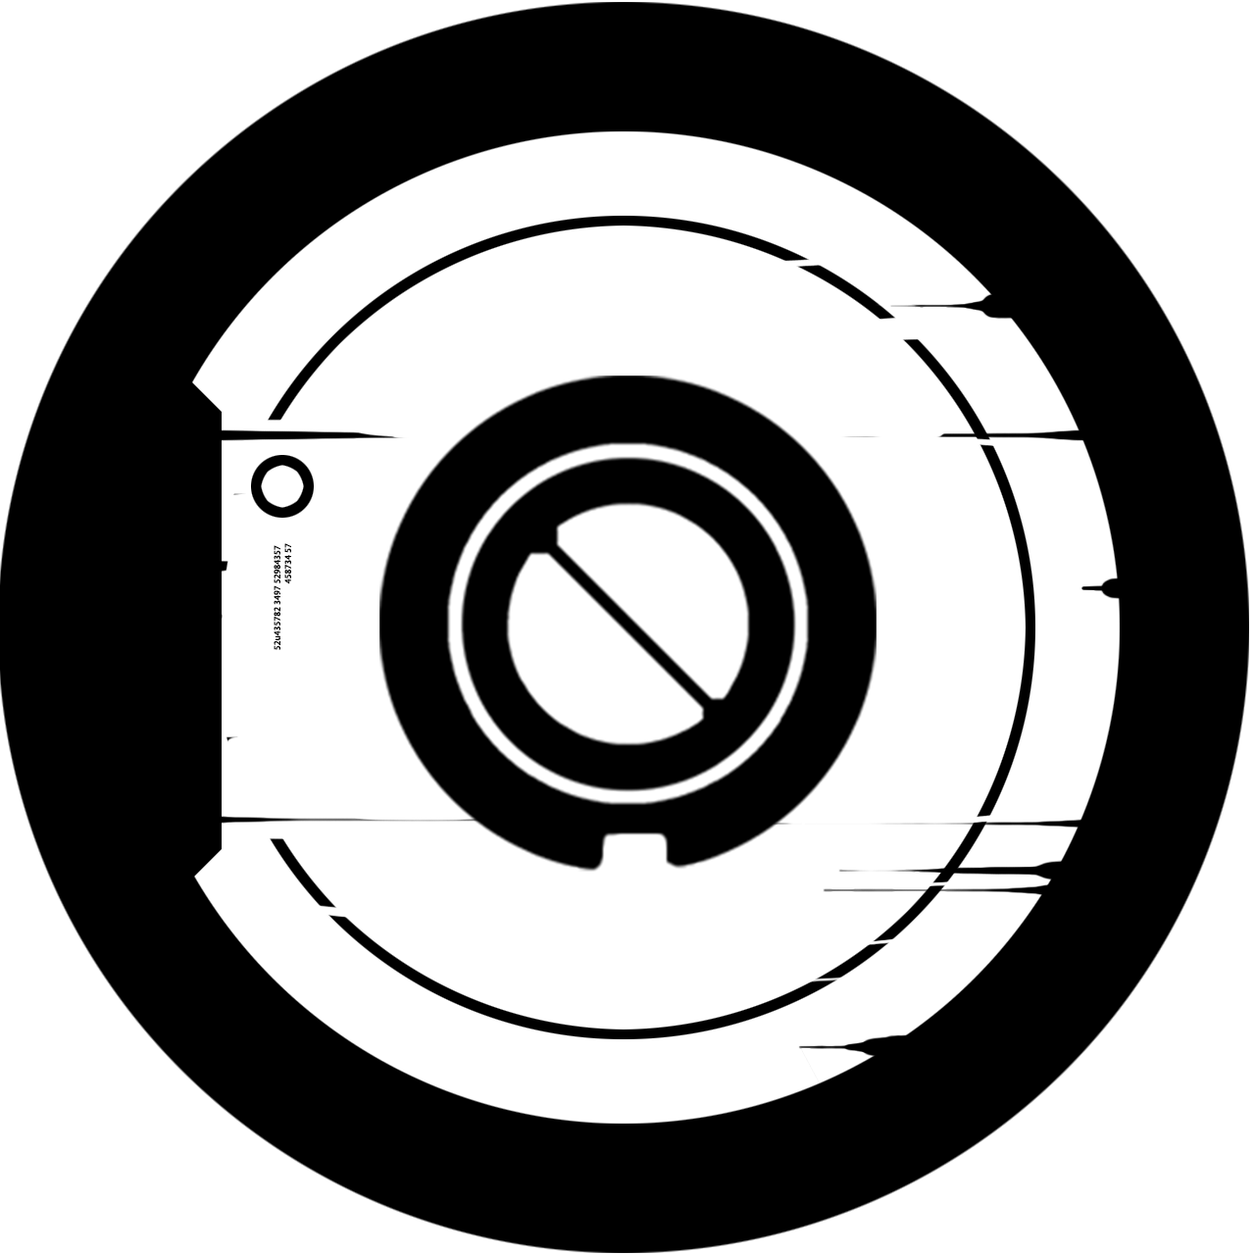
<style>
.page{position:relative;width:1255px;height:1255px;background:#ffffff}
.page>*{position:absolute;margin:0}
.t1{font:9px "MyriadPro-Regular";color:#000000;font-weight:bold}
</style>
<div class="page">
<p class="t1" style="left:273px;top:543px;width:18px;height:107px;text-align:right;rotate:-90deg">52u435782 3497 52984357 <br>458734 57</p>
</div>
